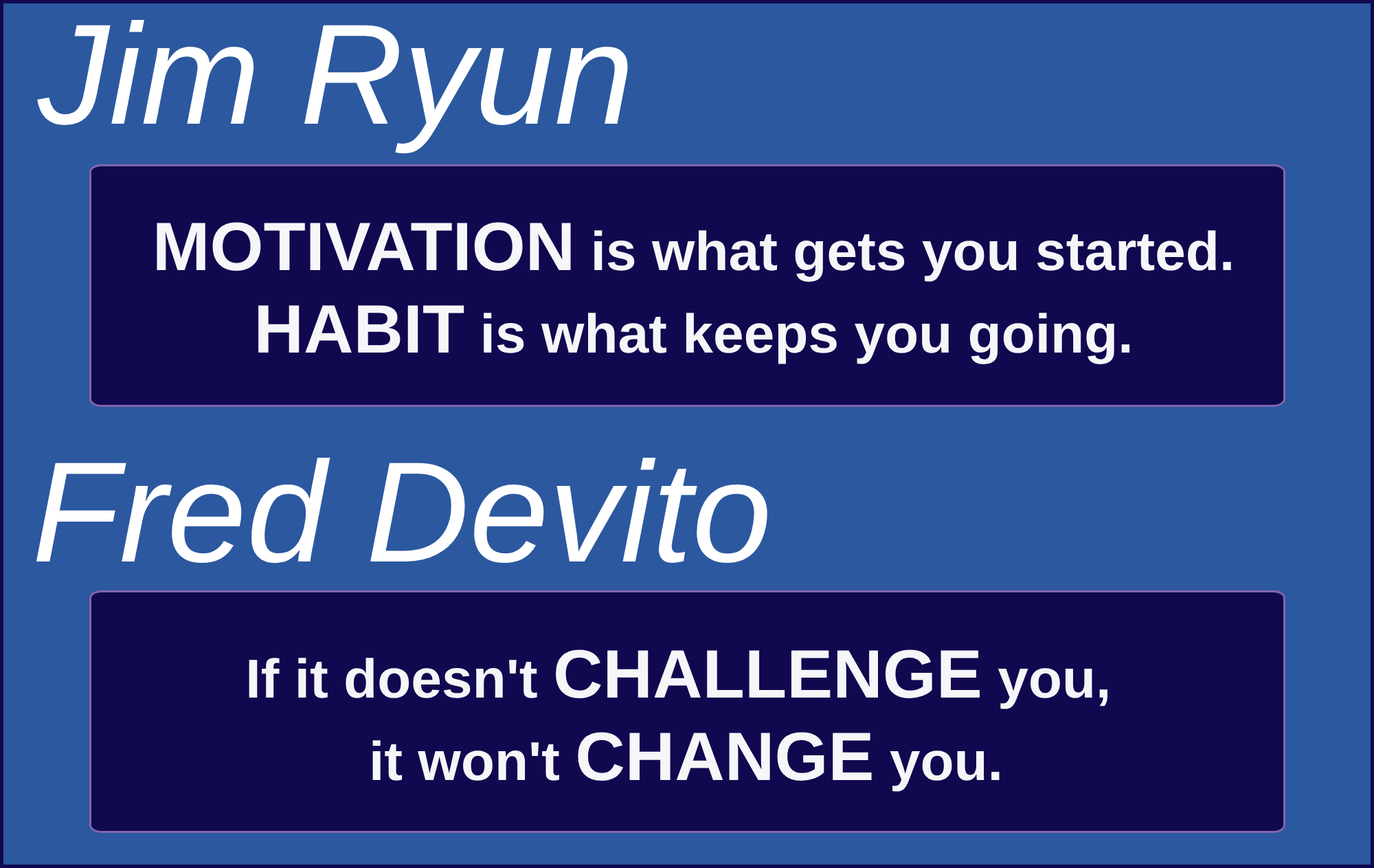
<style>
.page{position:relative;width:1374px;height:868px;background:#2c589f}
.page>*{position:absolute;margin:0}
.t1{font:143.1px "Arial-ItalicMT";color:#ffffff}
.t2{font:54.7px "Arial-BoldMT";color:#f6f6f9}
.t3{font:68.4px "Arial-BoldMT";color:#f6f6f9}
</style>
<div class="page">
<p class="t1" style="left:37px;top:20px;width:591px;height:134px">Jim Ryun</p>
<p class="t2" style="left:157px;top:222px;width:1074px;height:142px;text-align:center"><span class="t3">MOTIVATION </span>is what gets you started.<br><span class="t3">HABIT </span>is what keeps you going.</p>
<p class="t1" style="left:36px;top:458px;width:731px;height:105px">Fred Devito</p>
<p class="t2" style="left:249px;top:649px;width:859px;height:143px;text-align:center">If it doesn't <span class="t3">CHALLENGE </span>you, <br>it won't <span class="t3">CHANGE </span>you.</p>
</div>
